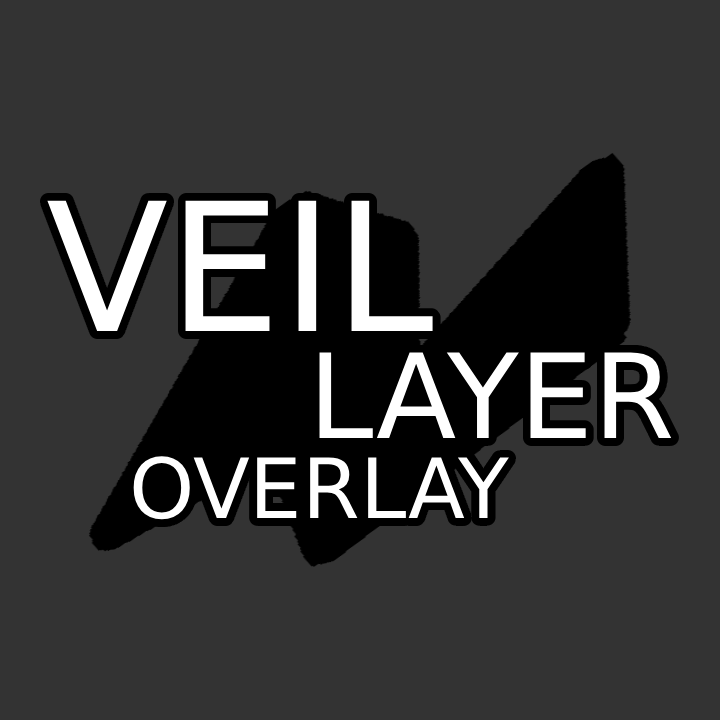
<style>
.page{position:relative;width:720px;height:720px;background:#333333}
.page>*{position:absolute;margin:0}
.t1{font:178.7px "DejaVuSans";color:#ffffff}
.t2{font:117.4px "DejaVuSans";color:#ffffff}
.t3{font:83.1px "DejaVuSans";color:#ffffff}
</style>
<div class="page">
<p class="t1" style="left:47px;top:200px;width:386px;height:131px">VEIL</p>
<p class="t2" style="left:319px;top:352px;width:353px;height:86px">LAYER</p>
<p class="t3" style="left:133px;top:456px;width:376px;height:64px">OVERLAY</p>
</div>
